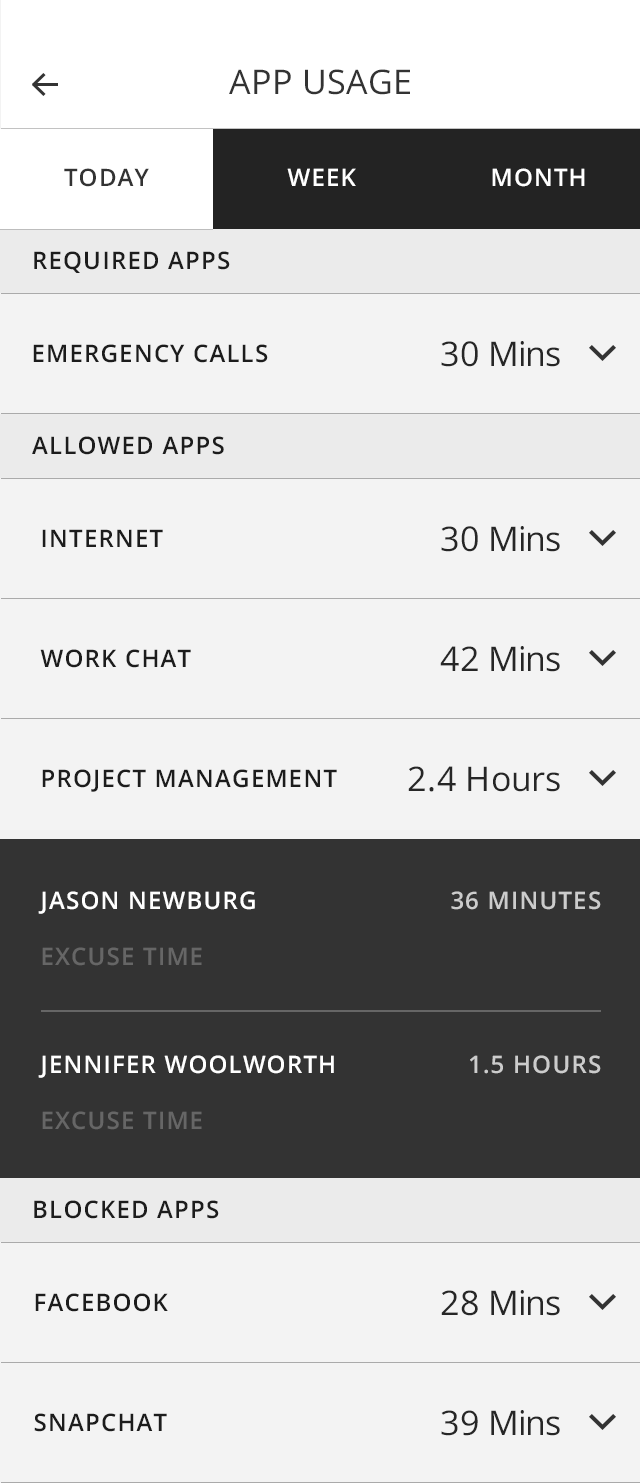
<style>
.page{position:relative;width:640px;height:1483px;background:#f3f3f3}
.page>*{position:absolute;margin:0}
.t1{font:34px "OpenSans";letter-spacing:0.01em;color:#333333}
.t2{font:24px "OpenSans-Semibold";letter-spacing:0.05em;color:#333333;text-transform:uppercase}
.t3{font:24px "OpenSans-Semibold";letter-spacing:0.05em;color:#ffffff;text-transform:uppercase}
.t4{font:24px "OpenSans-Semibold";letter-spacing:0.05em;color:#1c1c1c;text-transform:uppercase}
.t5{font:34px "OpenSans";color:#262626}
.t6{font:24px/56px "OpenSans-Semibold";letter-spacing:0.05em;color:#ffffff;text-transform:uppercase}
.t7{font:24px/56px "OpenSans-Semibold";letter-spacing:0.05em;color:#666666;text-transform:uppercase}
.t8{font:24px "OpenSans-Semibold";letter-spacing:0.05em;color:#cccccc;text-transform:uppercase}
</style>
<div class="page">
<p class="t1" style="left:229px;top:69px;width:181px;height:26px">APP USAGE</p>
<p class="t2" style="left:64px;top:168px;width:85px;height:19px">today</p>
<p class="t3" style="left:287px;top:168px;width:69px;height:18px">week</p>
<p class="t3" style="left:492px;top:168px;width:93px;height:19px">month</p>
<p class="t4" style="left:34px;top:251px;width:196px;height:22px">REQUIRED APPS</p>
<p class="t5" style="left:441px;top:341px;width:119px;height:26px">30 Mins</p>
<p class="t4" style="left:33px;top:344px;width:235px;height:19px">EMERGENCY CALLS</p>
<p class="t4" style="left:32px;top:436px;width:192px;height:19px">ALLOWED APPS</p>
<p class="t4" style="left:42px;top:529px;width:121px;height:18px">INTERNET</p>
<p class="t5" style="left:441px;top:526px;width:119px;height:26px">30 Mins</p>
<p class="t4" style="left:40px;top:649px;width:151px;height:19px">WORK CHAT</p>
<p class="t5" style="left:440px;top:646px;width:120px;height:26px">42 Mins</p>
<p class="t4" style="left:42px;top:769px;width:295px;height:23px">PROJECT MANAGEMENT</p>
<p class="t5" style="left:408px;top:766px;width:152px;height:26px">2.4 Hours</p>
<p class="t6" style="left:38px;top:891px;width:217px;height:75px">Jason Newburg<br><span class="t7">EXCUSE TIME</span></p>
<p class="t8" style="left:451px;top:891px;width:150px;height:19px">36 Minutes</p>
<p class="t3" style="left:38px;top:1055px;width:296px;height:75px">JENNIFER WOOLWORTH<br><span class="t7">EXCUSE TIME</span></p>
<p class="t8" style="left:470px;top:1055px;width:131px;height:19px">1.5 HOURS</p>
<p class="t4" style="left:34px;top:1200px;width:185px;height:19px">BLOCKED APPS</p>
<p class="t4" style="left:35px;top:1293px;width:133px;height:19px">FACEBOOK</p>
<p class="t5" style="left:441px;top:1290px;width:119px;height:26px">28 Mins</p>
<p class="t4" style="left:34px;top:1413px;width:133px;height:19px">SNAPCHAT</p>
<p class="t5" style="left:441px;top:1410px;width:119px;height:26px">39 Mins</p>
</div>
